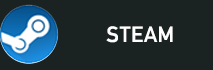
<style>
.page{position:relative;width:213px;height:70px;background:#1b2222}
.page>*{position:absolute;margin:0}
.t1{font:22px "mittleschriftcaps";color:#ffffff}
</style>
<div class="page">
<p class="t1" style="left:106px;top:26px;width:67px;height:17px">STEAM</p>
</div>
